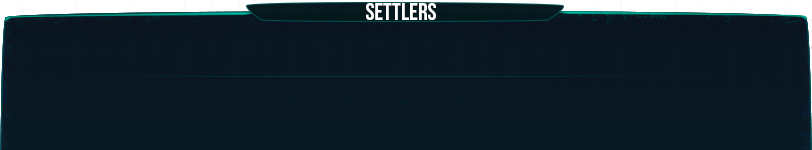
<style>
.page{position:relative;width:812px;height:150px}
.page>*{position:absolute;margin:0}
.t1{font:24px "BebasNeue-Regular";color:#ffffff}
</style>
<div class="page">
<p class="t1" style="left:366px;top:3px;width:70px;height:17px">SETTLERS</p>
</div>
